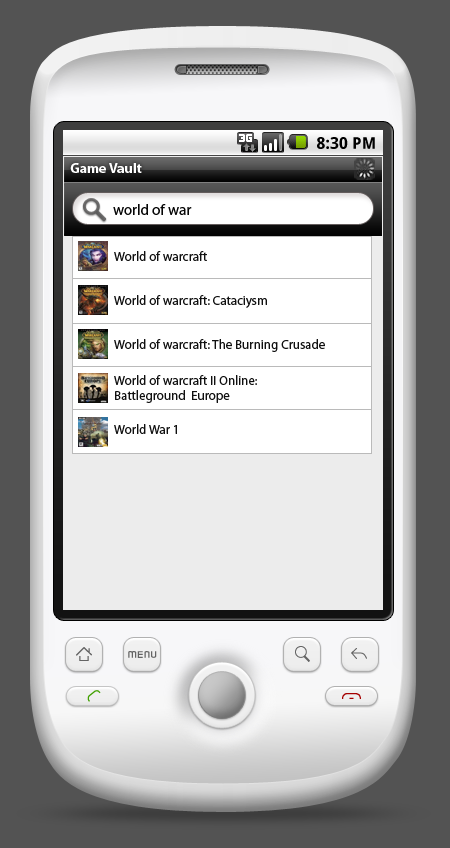
<style>
.page{position:relative;width:450px;height:848px;background:#535353}
.page>*{position:absolute;margin:0}
.t1{font:16px "DroidSans-Bold";letter-spacing:0.005em;color:#000000}
.t2{font:14px "MyriadPro-Bold";color:#ffffff}
.t3{font:15px "MyriadPro-Regular";color:#060606}
.t4{font:13px "MyriadPro-Regular";color:#101010}
.t5{font:13px/15px "MyriadPro-Regular";color:#101010}
</style>
<div class="page">
<p class="t1" style="left:317px;top:137px;width:58px;height:12px">8:30 PM</p>
<p class="t2" style="left:70px;top:163px;width:72px;height:10px">Game Vault</p>
<p class="t3" style="left:113px;top:204px;width:79px;height:11px">world of war</p>
<p class="t4" style="left:114px;top:251px;width:93px;height:10px">World of warcraft</p>
<p class="t4" style="left:114px;top:295px;width:153px;height:13px">World of warcraft: Cataciysm</p>
<p class="t4" style="left:114px;top:339px;width:211px;height:13px">World of warcraft: The Burning Crusade</p>
<p class="t5" style="left:114px;top:375px;width:143px;height:28px">World of warcraft II Online: <br>Battleground  Europe</p>
<p class="t4" style="left:114px;top:424px;width:63px;height:10px">World War 1</p>
</div>
